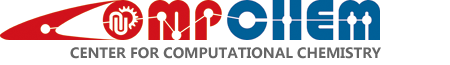
<style>
.page{position:relative;width:450px;height:65px;background:#ffffff}
.page>*{position:absolute;margin:0}
.t1{font:14px "MicrosoftYaHei-Bold";color:#666666}
</style>
<div class="page">
<p class="t1" style="left:70px;top:47px;width:311px;height:12px">CENTER FOR COMPUTATIONAL CHEMISTRY</p>
</div>
